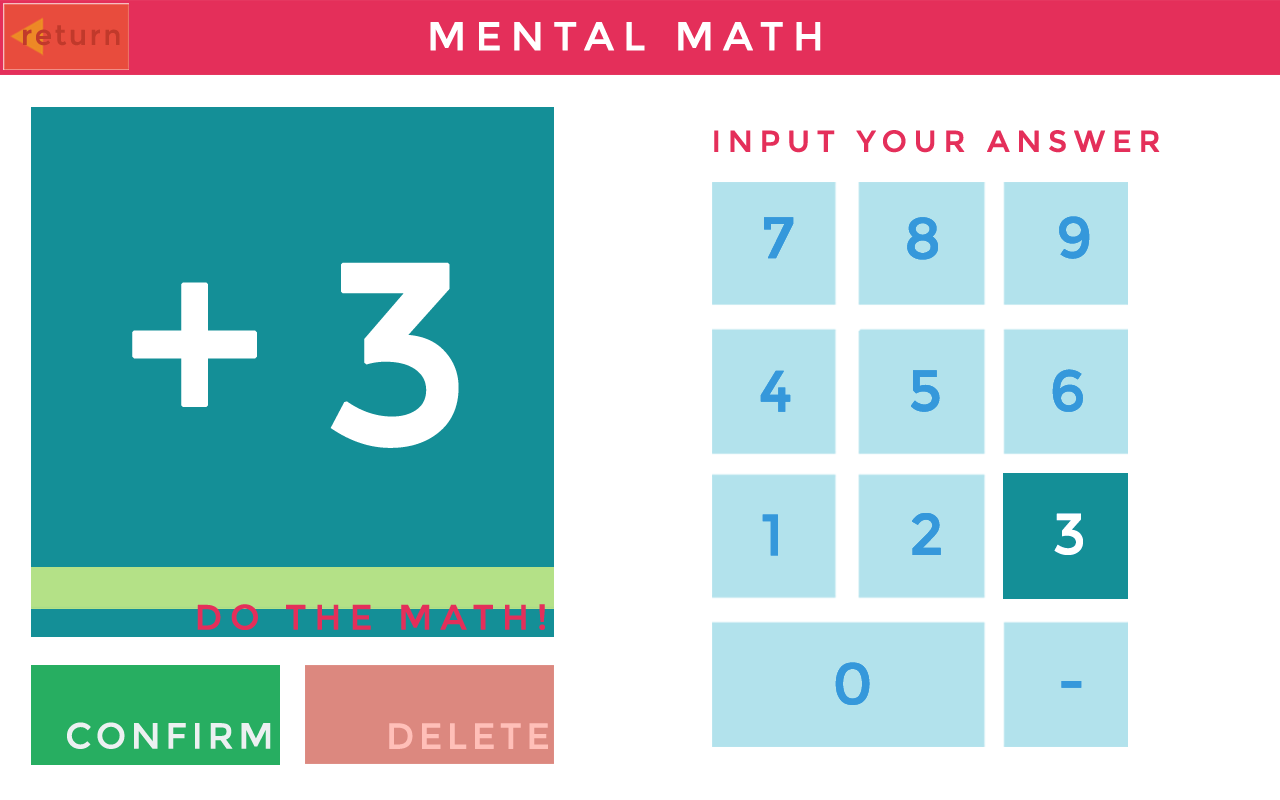
<style>
.page{position:relative;width:1280px;height:800px;background:#ffffff}
.page>*{position:absolute;margin:0}
.t1{font:30px "Montserrat-Regular";letter-spacing:0.2em;color:#e42f5a;text-transform:uppercase;font-weight:bold}
.t2{font:57.6px "Montserrat-Regular";letter-spacing:0.2em;color:#3598db;text-transform:uppercase;font-weight:bold}
.t3{font:256.5px "Montserrat-Regular";letter-spacing:0.2em;color:#ffffff;text-transform:uppercase;font-weight:bold}
.t4{font:57.6px "Montserrat-Regular";letter-spacing:0.2em;color:#ffffff;text-transform:uppercase;font-weight:bold}
.t5{font:35.1px "Montserrat-Regular";letter-spacing:0.2em;color:#e42f5a;text-transform:uppercase;font-weight:bold}
.t6{font:36px "Montserrat-Regular";letter-spacing:0.1em;color:#ecf0f1;text-transform:uppercase;font-weight:bold}
.t7{font:36px "Montserrat-Regular";letter-spacing:0.1em;color:#ffbfb8;text-transform:uppercase;font-weight:bold}
</style>
<div class="page">
<p class="t1" style="left:714px;top:130px;width:446px;height:23px">Input your Answer</p>
<p class="t2" style="left:764px;top:217px;width:30px;height:42px">7</p>
<p class="t2" style="left:907px;top:217px;width:31px;height:43px">8</p>
<p class="t2" style="left:1059px;top:216px;width:31px;height:43px">9</p>
<p class="t3" style="left:132px;top:262px;width:327px;height:186px">+3</p>
<p class="t2" style="left:760px;top:370px;width:31px;height:42px">4</p>
<p class="t2" style="left:911px;top:370px;width:29px;height:42px">5</p>
<p class="t2" style="left:1052px;top:369px;width:31px;height:43px">6</p>
<p class="t2" style="left:762px;top:514px;width:16px;height:42px">1</p>
<p class="t2" style="left:912px;top:513px;width:29px;height:42px">2</p>
<p class="t4" style="left:1054px;top:513px;width:29px;height:42px">3</p>
<p class="t5" style="left:197px;top:604px;width:348px;height:26px">Do the Math!</p>
<p class="t2" style="left:835px;top:662px;width:35px;height:43px">0</p>
<p class="t2" style="left:1061px;top:681px;width:21px;height:7px">-</p>
<p class="t6" style="left:67px;top:722px;width:204px;height:27px">Confirm</p>
<p class="t7" style="left:389px;top:723px;width:159px;height:26px">Delete</p>
</div>
